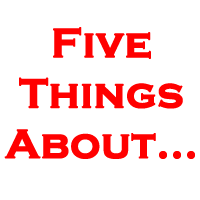
<style>
.page{position:relative;width:200px;height:200px;background:#ffffff}
.page>*{position:absolute;margin:0}
.t1{font:42px "CopperplateGothic-Bold";color:#ff0000;font-weight:bold}
</style>
<div class="page">
<p class="t1" style="left:4px;top:27px;width:191px;height:132px;text-align:center">Five<br>Things<br>About...</p>
</div>
